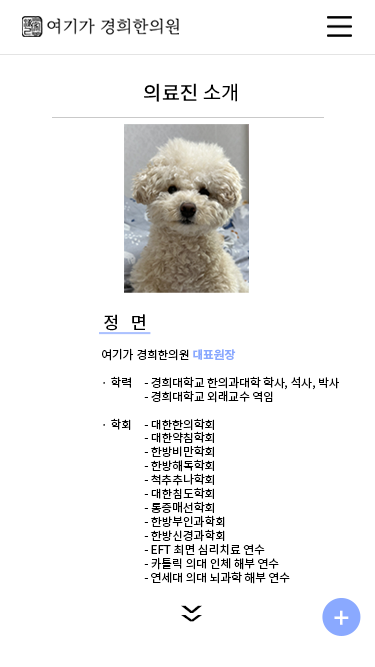
<style>
.page{position:relative;width:375px;height:667px;background:#ffffff}
.page>*{position:absolute;margin:0}
.t1{font:20px "NotoSansKR-Medium";color:#000000}
.t2{font:20px "NotoSansKR-Regular";color:#000000}
.t3{font:17.5px "NotoSansKR-Medium";color:#000000}
.t4{font:11.7px "NotoSansKR-Regular";color:#000000}
.t5{font:11.7px "NotoSansKR-Bold";color:#8aa9ff}
.t6{font:55.7px "NotoSansKR-Light";color:#000000;scale:1.27 1}
.t7{font:48.8px "NotoSansKR-Light";color:#000000;scale:1.45 1}
.t8{font:29.1px "NotoSans-Medium";color:#ffffff}
</style>
<div class="page">
<p class="t1" style="left:144px;top:83px;width:93px;height:19px">의료진 <span class="t2">소개</span></p>
<p class="t3" style="left:104px;top:314px;width:41px;height:17px">정   면</p>
<p class="t4" style="left:102px;top:348px;width:237px;height:236px">여기가 경희한의원 <span class="t5">대표원장<br></span><br>· 학력    - 경희대학교 한의과대학 학사, 석사, 박사<br>     - 경희대학교 외래교수 역임<br><br>· 학회    - 대한한의학회<br>       - 대한약침학회<br>       - 한방비만학회<br>       - 한방해독학회<br>       - 척추추나학회<br>       - 대한침도학회<br>       - 통증매선학회<br>       - 한방부인과학회<br>       - 한방신경과학회<br>       - EFT 최면 심리치료 연수 <br>       - 카톨릭 의대 인체 해부 연수<br>       - 연세대 의대 뇌과학 해부 연수</p>
<p class="t6" style="left:181px;top:605px;width:21px;height:8px;rotate:180deg">＾</p>
<p class="t7" style="left:181px;top:615px;width:21px;height:7px;rotate:180deg">＾</p>
<p class="t8" style="left:334px;top:610px;width:15px;height:15px">+</p>
</div>
